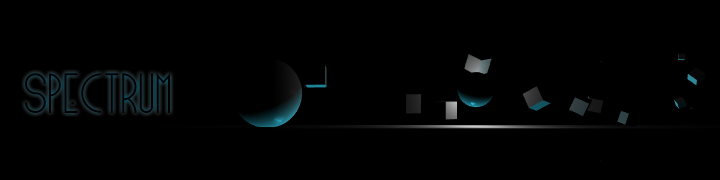
<style>
.page{position:relative;width:720px;height:180px;background:#000000}
.page>*{position:absolute;margin:0}
.t1{font:50px "Blake";letter-spacing:-0.005em;color:#000000}
</style>
<div class="page">
<p class="t1" style="left:25px;top:73px;width:145px;height:40px">spectrum</p>
</div>
